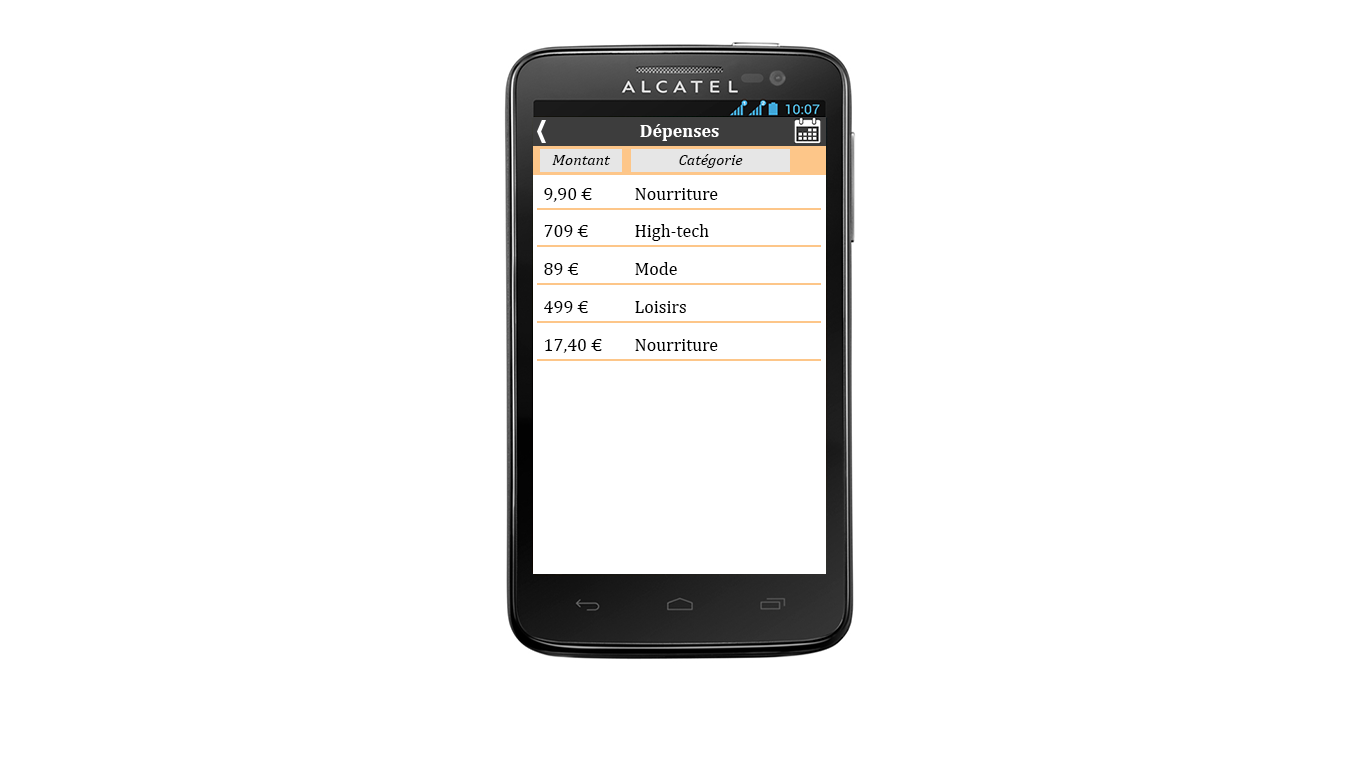
<style>
.page{position:relative;width:1366px;height:768px;background:#ffffff}
.page>*{position:absolute;margin:0}
.t1{font:18px "Cambria-Bold";color:#ffffff}
.t2{font:16px "Cambria-Italic";color:#000000}
.t3{font:18px "Cambria";color:#000000}
</style>
<div class="page">
<p class="t1" style="left:640px;top:124px;width:79px;height:17px">Dépenses</p>
<p class="t2" style="left:552px;top:155px;width:59px;height:10px">Montant</p>
<p class="t2" style="left:679px;top:154px;width:64px;height:14px">Catégorie</p>
<p class="t3" style="left:544px;top:188px;width:48px;height:14px">9,90 €</p>
<p class="t3" style="left:635px;top:188px;width:83px;height:12px">Nourriture</p>
<p class="t3" style="left:544px;top:225px;width:44px;height:12px">709 €</p>
<p class="t3" style="left:635px;top:224px;width:74px;height:17px">High-tech</p>
<p class="t3" style="left:544px;top:263px;width:34px;height:12px">89 €</p>
<p class="t3" style="left:635px;top:262px;width:42px;height:13px">Mode</p>
<p class="t3" style="left:544px;top:301px;width:44px;height:12px">499 €</p>
<p class="t3" style="left:635px;top:301px;width:51px;height:12px">Loisirs</p>
<p class="t3" style="left:545px;top:339px;width:57px;height:14px">17,40 €</p>
<p class="t3" style="left:635px;top:339px;width:83px;height:12px">Nourriture</p>
</div>
